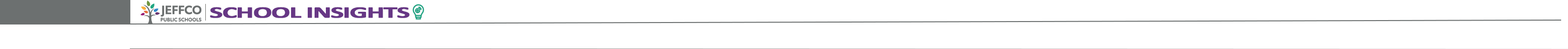
<style>
.page{position:relative;width:1568px;height:49px;background:#ffffff}
.page>*{position:absolute;margin:0}
.t1{font:16.3px "Calibri-Bold";letter-spacing:-0.05em;color:#673785;font-weight:bold;scale:1.7 1}
</style>
<div class="page">
<p class="t1" style="left:210px;top:7px;width:200px;height:11px">SCHOOL INSIGHTS</p>
</div>
